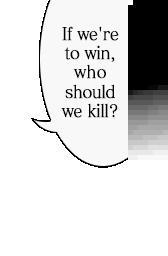
<style>
.page{position:relative;width:168px;height:256px;background:#ffffff}
.page>*{position:absolute;margin:0}
.t1{font:17.6px "MatissePro-M";letter-spacing:-0.05em;color:#000000;font-weight:bold;scale:0.91 1}
.t2{font:17.6px "MatissePro-M";letter-spacing:-0.005em;color:#000000;font-weight:bold;scale:0.91 1}
</style>
<div class="page">
<p class="t1" style="left:61px;top:26px;width:58px;height:92px;text-align:center">If we're<br>to win,<br><span class="t2">who<br></span>should<br>we kill?</p>
</div>
